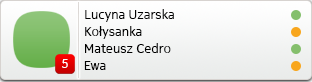
<style>
.page{position:relative;width:312px;height:82px}
.page>*{position:absolute;margin:0}
.t1{font:13px "NokiaPureText-Regular";color:#000000}
.t2{font:13px "NokiaPureText-Regular";color:#ffffff}
</style>
<div class="page">
<p class="t1" style="left:85px;top:9px;width:89px;height:13px">Lucyna Uzarska</p>
<p class="t1" style="left:85px;top:26px;width:57px;height:13px">Kołysanka</p>
<p class="t1" style="left:85px;top:43px;width:86px;height:10px">Mateusz Cedro</p>
<p class="t2" style="left:62px;top:59px;width:6px;height:9px">5</p>
<p class="t1" style="left:84px;top:61px;width:22px;height:9px">Ewa</p>
</div>
